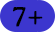
<style>
.page{position:relative;width:55px;height:32px;background:#3c36ce}
.page>*{position:absolute;margin:0}
.t1{font:29.2px "AveriaSerif-Regular";color:#000000}
</style>
<div class="page">
<p class="t1" style="left:13px;top:7px;width:30px;height:20px">7+</p>
</div>
